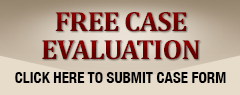
<style>
.page{position:relative;width:240px;height:95px;background:#e7dbca}
.page>*{position:absolute;margin:0}
.t1{font:28.2px/27.1px "Cambria-Bold";letter-spacing:-0.025em;color:#660000}
.t2{font:15px "HelveticaNeue-CondensedBold";color:#000000}
</style>
<div class="page">
<p class="t1" style="left:42px;top:12px;width:158px;height:48px;text-align:center">FREE CASE<br>EVALUATION</p>
<p class="t2" style="left:15px;top:72px;width:211px;height:11px">CLICK HERE TO SUBMIT CASE FORM</p>
</div>
